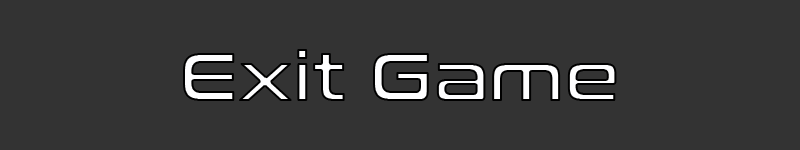
<style>
.page{position:relative;width:800px;height:150px;background:#333333}
.page>*{position:absolute;margin:0}
.t1{font:69.4px "ConthraxSb-Regular"}
</style>
<div class="page">
<p class="t1" style="left:183px;top:49px;width:434px;height:52px">Exit Game</p>
</div>
